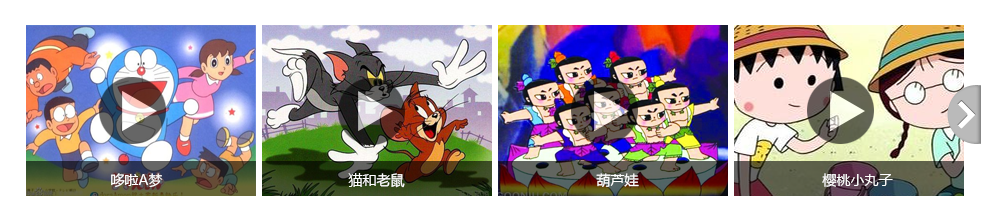
<style>
.page{position:relative;width:990px;height:220px;background:#ffffff}
.page>*{position:absolute;margin:0}
.t1{font:14px "MicrosoftYaHei";color:#ffffff}
</style>
<div class="page">
<p class="t1" style="left:111px;top:173px;width:52px;height:15px">哆啦A梦</p>
<p class="t1" style="left:348px;top:173px;width:57px;height:15px">猫和老鼠</p>
<p class="t1" style="left:596px;top:173px;width:43px;height:14px">葫芦娃</p>
<p class="t1" style="left:822px;top:173px;width:71px;height:14px">樱桃小丸子</p>
</div>
